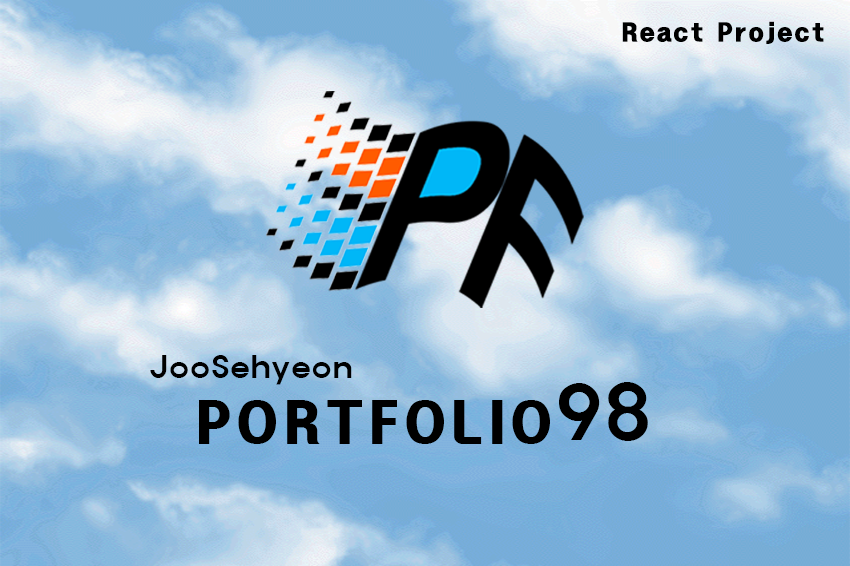
<style>
.page{position:relative;width:850px;height:566px}
.page>*{position:absolute;margin:0}
.t1{font:22.2px "HeadlineR-HM";letter-spacing:0.06em;color:#000000}
.t2{font:28.9px "ExpoM-HM";letter-spacing:0.06em;color:#000000}
.t3{font:50.3px "HeadlineR-HM";letter-spacing:0.08em;color:#000000}
.t4{font:71.9px "ExpoM-HM";letter-spacing:0.06em;color:#000000}
</style>
<div class="page">
<p class="t1" style="left:622px;top:21px;width:202px;height:23px">React Project</p>
<p class="t2" style="left:150px;top:355px;width:202px;height:30px">JooSehyeon</p>
<p class="t3" style="left:199px;top:382px;width:449px;height:62px">PORTFOLIO<span class="t4">98</span></p>
</div>
